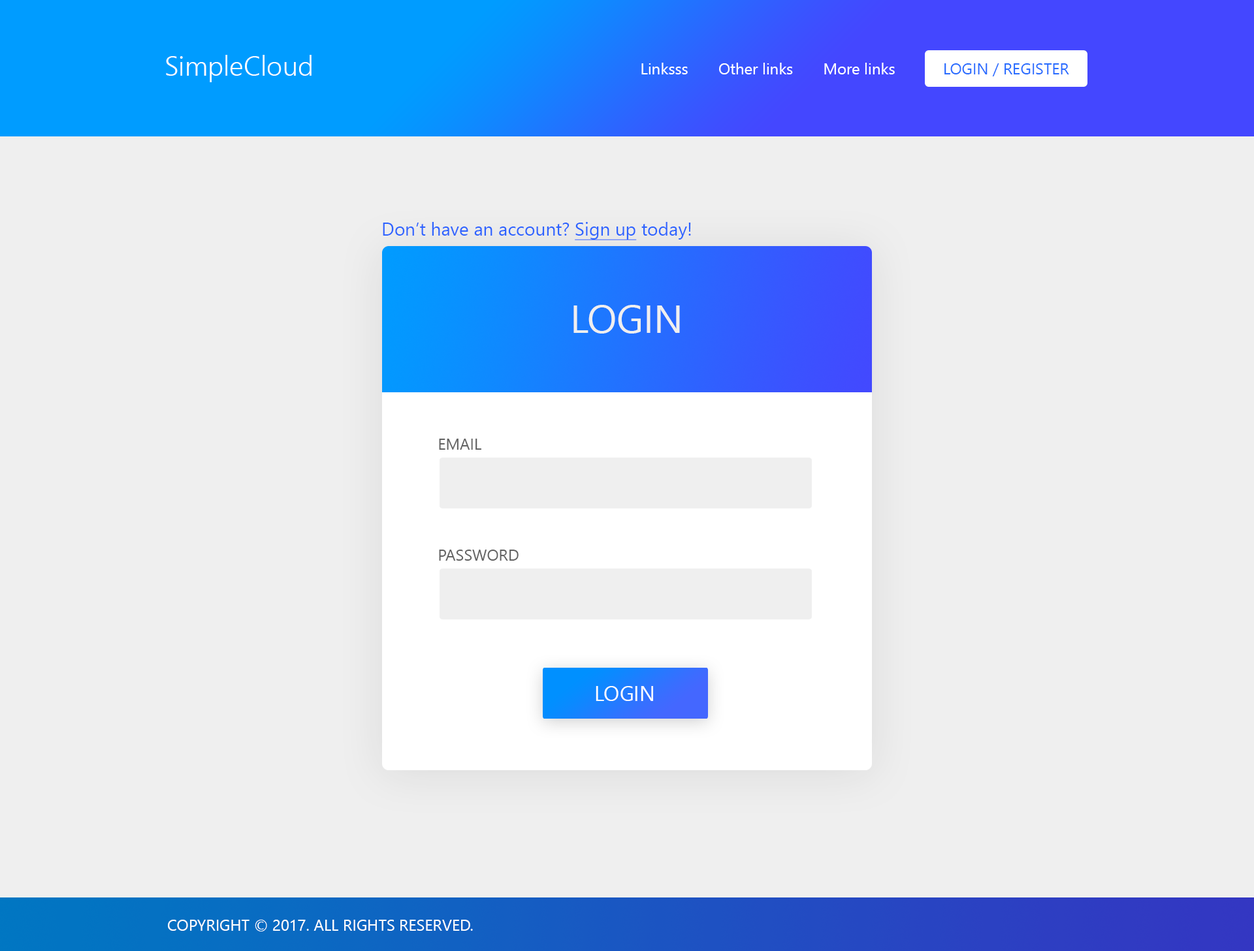
<style>
.page{position:relative;width:1254px;height:951px;background:#efefef}
.page>*{position:absolute;margin:0}
.t1{font:27.4px "NirmalaUI-Semilight";color:#ffffff}
.t2{font:15.7px "NirmalaUI";color:#ffffff}
.t3{font:15.7px "NirmalaUI";color:#276cff}
.t4{font:18.3px "NirmalaUI";color:#2d63ff}
.t5{font:18.3px "NirmalaUI";color:#2d63ff;text-decoration:underline}
.t6{font:39.2px "NirmalaUI";color:#efefef}
.t7{font:15.7px "NirmalaUI";color:#626262}
.t8{font:20.9px "NirmalaUI";color:#ffffff}
</style>
<div class="page">
<p class="t1" style="left:166px;top:55px;width:145px;height:27px">SimpleCloud</p>
<p class="t2" style="left:641px;top:63px;width:253px;height:11px">Linksss       Other links       More links</p>
<p class="t3" style="left:944px;top:63px;width:125px;height:13px">LOGIN / REGISTER</p>
<p class="t4" style="left:383px;top:222px;width:308px;height:18px">Don’t have an account? <span class="t5">Sign up</span> today!</p>
<p class="t6" style="left:573px;top:305px;width:107px;height:29px">LOGIN</p>
<p class="t7" style="left:439px;top:439px;width:42px;height:11px">EMAIL</p>
<p class="t7" style="left:439px;top:550px;width:79px;height:11px">PASSWORD</p>
<p class="t8" style="left:595px;top:686px;width:58px;height:15px">LOGIN</p>
<p class="t2" style="left:168px;top:920px;width:305px;height:12px">COPYRIGHT © 2017. ALL RIGHTS RESERVED.</p>
</div>
